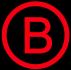
<style>
.page{position:relative;width:71px;height:70px;background:#000000}
.page>*{position:absolute;margin:0}
.t1{font:50px "ArialMT";letter-spacing:0.1em;color:#f80013}
</style>
<div class="page">
<p class="t1" style="left:24px;top:17px;width:28px;height:37px">B</p>
</div>
